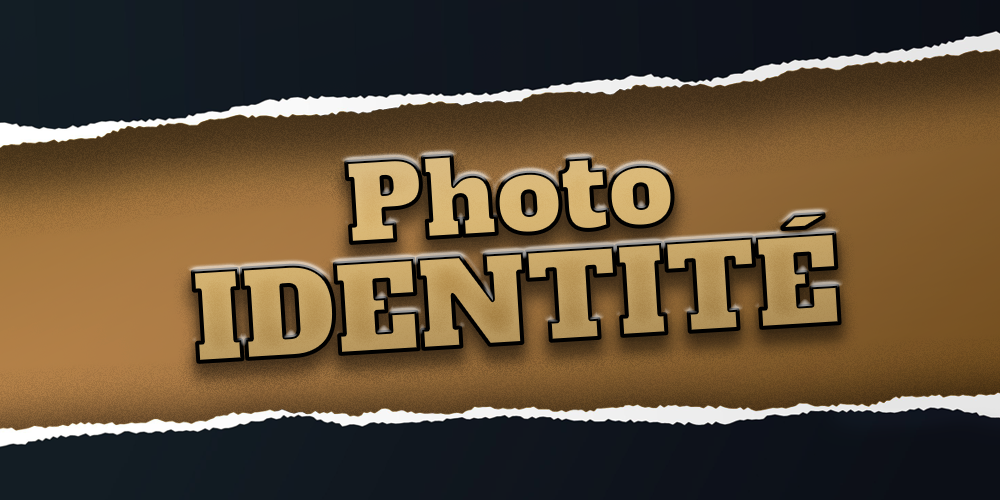
<style>
.page{position:relative;width:1000px;height:500px}
.page>*{position:absolute;margin:0}
.t1{font:116.1px/109.9px "AlfaSlabOne-Regular"}
.t2{font:104px/109.9px "AlfaSlabOne-Regular"}
</style>
<div class="page">
<p class="t1" style="left:192px;top:155px;width:648px;height:207px;text-align:center;rotate:-3deg"><span class="t2">Photo<br></span>IDENTITÉ</p>
</div>
